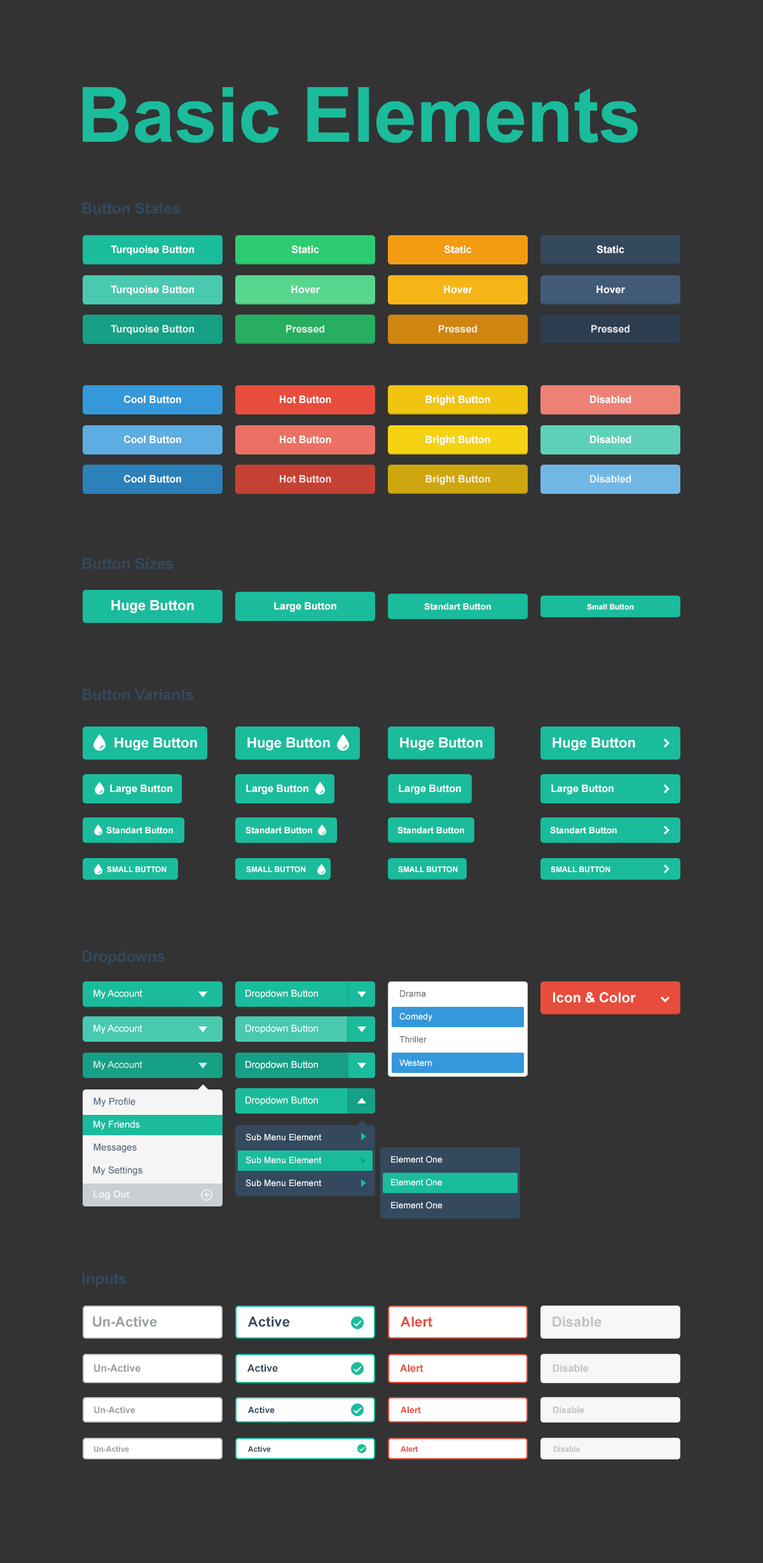
<style>
.page{position:relative;width:763px;height:1563px;background:#333333}
.page>*{position:absolute;margin:0}
.t1{font:76.3px "Arial-BoldMT";color:#1abc9c}
.t2{font:15.3px "Arial-BoldMT";color:#34495e}
.t3{font:10.2px "Arial-BoldMT";color:#ffffff}
.t4{font:10.2px "Arial-BoldMT";color:#deeeea}
.t5{font:10.2px "Arial-BoldMT";color:#dff0e5}
.t6{font:10.2px "Arial-BoldMT";color:#f6eade}
.t7{font:10.2px "Arial-BoldMT";color:#e0e1e3}
.t8{font:10.2px "Arial-BoldMT";color:#f4e2e0}
.t9{font:10.2px "Arial-BoldMT";color:#f6efde}
.t10{font:14px "Arial-BoldMT";color:#ffffff}
.t11{font:8.9px "Arial-BoldMT";color:#ffffff}
.t12{font:7.6px "Arial-BoldMT";color:#ffffff}
.t13{font:9.5px "ArialMT";color:#ffffff}
.t14{font:8.9px "ArialMT";color:#666666}
.t15{font:8.9px "ArialMT";color:#ffffff}
.t16{font:9.5px "ArialMT";color:#deeeea}
.t17{font:9.5px "ArialMT";color:#415b76}
.t18{font:9.5px "Arial-BoldMT";color:#ffffff}
.t19{font:14px "Arial-BoldMT";color:#979da4}
.t20{font:14px "Arial-BoldMT";color:#34495e}
.t21{font:14px "Arial-BoldMT";color:#e74c3c}
.t22{font:14px "Arial-BoldMT";color:#bdc3c7}
.t23{font:10.2px "Arial-BoldMT";color:#979da4}
.t24{font:10.2px "Arial-BoldMT";color:#34495e}
.t25{font:10.2px "Arial-BoldMT";color:#e74c3c}
.t26{font:10.2px "Arial-BoldMT";color:#bdc3c7}
.t27{font:8.9px "Arial-BoldMT";color:#979da4}
.t28{font:8.9px "Arial-BoldMT";color:#34495e}
.t29{font:8.9px "Arial-BoldMT";color:#e74c3c}
.t30{font:8.9px "Arial-BoldMT";color:#bdc3c7}
.t31{font:7.6px "Arial-BoldMT";color:#979da4}
.t32{font:7.6px "Arial-BoldMT";color:#34495e}
.t33{font:7.6px "Arial-BoldMT";color:#e74c3c}
.t34{font:7.6px "Arial-BoldMT";color:#bdc3c7}
</style>
<div class="page">
<p class="t1" style="left:83px;top:87px;width:555px;height:56px">Basic Elements</p>
<p class="t2" style="left:82px;top:202px;width:98px;height:12px">Button States</p>
<p class="t3" style="left:111px;top:245px;width:83px;height:11px">Turquoise Button</p>
<p class="t3" style="left:291px;top:245px;width:28px;height:9px">Static</p>
<p class="t3" style="left:444px;top:245px;width:28px;height:9px">Static</p>
<p class="t3" style="left:596px;top:245px;width:28px;height:9px">Static</p>
<p class="t3" style="left:111px;top:285px;width:83px;height:11px">Turquoise Button</p>
<p class="t3" style="left:291px;top:285px;width:29px;height:9px">Hover</p>
<p class="t3" style="left:444px;top:285px;width:28px;height:9px">Hover</p>
<p class="t3" style="left:596px;top:285px;width:29px;height:9px">Hover</p>
<p class="t4" style="left:111px;top:325px;width:83px;height:10px">Turquoise Button</p>
<p class="t5" style="left:286px;top:325px;width:38px;height:8px">Pressed</p>
<p class="t6" style="left:439px;top:325px;width:38px;height:8px">Pressed</p>
<p class="t7" style="left:591px;top:325px;width:38px;height:8px">Pressed</p>
<p class="t3" style="left:124px;top:395px;width:57px;height:9px">Cool Button</p>
<p class="t3" style="left:280px;top:395px;width:51px;height:9px">Hot Button</p>
<p class="t3" style="left:425px;top:395px;width:65px;height:11px">Bright Button</p>
<p class="t3" style="left:590px;top:395px;width:41px;height:9px">Disabled</p>
<p class="t3" style="left:124px;top:435px;width:57px;height:9px">Cool Button</p>
<p class="t3" style="left:280px;top:435px;width:51px;height:9px">Hot Button</p>
<p class="t3" style="left:425px;top:435px;width:65px;height:11px">Bright Button</p>
<p class="t3" style="left:590px;top:435px;width:41px;height:9px">Disabled</p>
<p class="t3" style="left:124px;top:475px;width:57px;height:8px">Cool Button</p>
<p class="t8" style="left:280px;top:475px;width:51px;height:8px">Hot Button</p>
<p class="t9" style="left:425px;top:475px;width:65px;height:10px">Bright Button</p>
<p class="t3" style="left:590px;top:475px;width:41px;height:8px;opacity:0.8">Disabled</p>
<p class="t2" style="left:82px;top:558px;width:91px;height:12px">Button Sizes</p>
<p class="t10" style="left:111px;top:600px;width:83px;height:13px">Huge Button</p>
<p class="t3" style="left:274px;top:602px;width:62px;height:10px">Large Button</p>
<p class="t11" style="left:424px;top:603px;width:67px;height:7px">Standart Button</p>
<p class="t12" style="left:587px;top:604px;width:47px;height:6px">Small Button</p>
<p class="t2" style="left:82px;top:688px;width:111px;height:13px">Button Variants</p>
<p class="t10" style="left:114px;top:737px;width:83px;height:14px">Huge Button</p>
<p class="t10" style="left:247px;top:737px;width:83px;height:14px">Huge Button</p>
<p class="t10" style="left:400px;top:737px;width:82px;height:14px">Huge Button</p>
<p class="t10" style="left:552px;top:737px;width:83px;height:14px">Huge Button</p>
<p class="t3" style="left:110px;top:784px;width:62px;height:11px">Large Button</p>
<p class="t3" style="left:246px;top:784px;width:62px;height:11px">Large Button</p>
<p class="t3" style="left:399px;top:784px;width:62px;height:11px">Large Button</p>
<p class="t3" style="left:551px;top:784px;width:62px;height:11px">Large Button</p>
<p class="t11" style="left:106px;top:826px;width:67px;height:8px">Standart Button</p>
<p class="t11" style="left:245px;top:826px;width:67px;height:8px">Standart Button</p>
<p class="t11" style="left:397px;top:826px;width:67px;height:8px">Standart Button</p>
<p class="t11" style="left:550px;top:826px;width:67px;height:8px">Standart Button</p>
<p class="t12" style="left:107px;top:866px;width:60px;height:7px">SMALL BUTTON</p>
<p class="t12" style="left:246px;top:866px;width:60px;height:7px">SMALL BUTTON</p>
<p class="t12" style="left:398px;top:866px;width:60px;height:7px">SMALL BUTTON</p>
<p class="t12" style="left:551px;top:866px;width:59px;height:7px">SMALL BUTTON</p>
<p class="t2" style="left:82px;top:950px;width:83px;height:15px">Dropdowns</p>
<p class="t13" style="left:93px;top:990px;width:49px;height:9px">My Account</p>
<p class="t13" style="left:245px;top:990px;width:73px;height:9px">Dropdown Button</p>
<p class="t14" style="left:400px;top:990px;width:26px;height:7px">Drama</p>
<p class="t10" style="left:553px;top:992px;width:83px;height:11px">Icon &amp; Color</p>
<p class="t15" style="left:399px;top:1013px;width:33px;height:9px">Comedy</p>
<p class="t13" style="left:93px;top:1025px;width:49px;height:9px">My Account</p>
<p class="t13" style="left:245px;top:1025px;width:73px;height:9px">Dropdown Button</p>
<p class="t14" style="left:399px;top:1036px;width:28px;height:7px">Thriller</p>
<p class="t16" style="left:93px;top:1061px;width:49px;height:9px">My Account</p>
<p class="t13" style="left:245px;top:1061px;width:73px;height:9px">Dropdown Button</p>
<p class="t15" style="left:399px;top:1060px;width:33px;height:6px">Western</p>
<p class="t17" style="left:93px;top:1098px;width:42px;height:9px">My Profile</p>
<p class="t13" style="left:245px;top:1097px;width:73px;height:8px">Dropdown Button</p>
<p class="t13" style="left:93px;top:1121px;width:47px;height:9px">My Friends</p>
<p class="t15" style="left:245px;top:1133px;width:77px;height:8px">Sub Menu Element</p>
<p class="t17" style="left:93px;top:1144px;width:44px;height:9px">Messages</p>
<p class="t15" style="left:245px;top:1156px;width:77px;height:8px">Sub Menu Element</p>
<p class="t15" style="left:391px;top:1156px;width:51px;height:7px">Element One</p>
<p class="t17" style="left:93px;top:1166px;width:49px;height:9px">My Settings</p>
<p class="t15" style="left:245px;top:1179px;width:77px;height:8px">Sub Menu Element</p>
<p class="t15" style="left:391px;top:1179px;width:51px;height:7px">Element One</p>
<p class="t18" style="left:93px;top:1191px;width:37px;height:9px;opacity:0.8">Log Out</p>
<p class="t15" style="left:391px;top:1201px;width:51px;height:8px">Element One</p>
<p class="t2" style="left:82px;top:1273px;width:45px;height:14px">Inputs</p>
<p class="t19" style="left:93px;top:1317px;width:64px;height:10px">Un-Active</p>
<p class="t20" style="left:248px;top:1317px;width:42px;height:10px">Active</p>
<p class="t21" style="left:400px;top:1317px;width:32px;height:10px">Alert</p>
<p class="t22" style="left:552px;top:1317px;width:49px;height:10px">Disable</p>
<p class="t23" style="left:94px;top:1364px;width:46px;height:8px">Un-Active</p>
<p class="t24" style="left:247px;top:1364px;width:31px;height:8px">Active</p>
<p class="t25" style="left:400px;top:1364px;width:23px;height:8px">Alert</p>
<p class="t26" style="left:552px;top:1364px;width:36px;height:8px">Disable</p>
<p class="t27" style="left:94px;top:1407px;width:41px;height:7px">Un-Active</p>
<p class="t28" style="left:248px;top:1407px;width:27px;height:7px">Active</p>
<p class="t29" style="left:400px;top:1407px;width:21px;height:7px">Alert</p>
<p class="t30" style="left:553px;top:1407px;width:31px;height:7px">Disable</p>
<p class="t31" style="left:94px;top:1446px;width:35px;height:7px">Un-Active</p>
<p class="t32" style="left:248px;top:1446px;width:23px;height:6px">Active</p>
<p class="t33" style="left:400px;top:1446px;width:18px;height:6px">Alert</p>
<p class="t34" style="left:553px;top:1446px;width:27px;height:6px">Disable</p>
</div>
